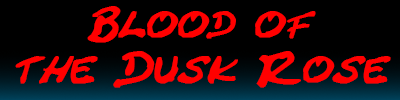
<style>
.page{position:relative;width:400px;height:100px;background:#000000}
.page>*{position:absolute;margin:0}
.t1{font:37px "CrackedJohnnie";color:#ff0000;font-weight:bold;font-style:italic}
</style>
<div class="page">
<p class="t1" style="left:15px;top:6px;width:376px;height:82px;text-align:center">Blood of<br>the Dusk Rose</p>
</div>
